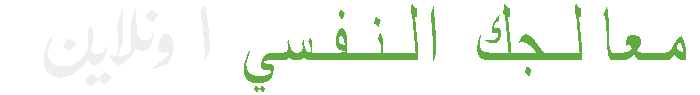
<style>
.page{position:relative;width:700px;height:95px;background:#ffffff}
.page>*{position:absolute;margin:0}
.t1{font:92.7px "UrduTypesetting";letter-spacing:-0.02em;color:#eeeeee;scale:1.1 1}
.t2{font:92.7px "SimplifiedArabicFixed";letter-spacing:-0.02em;color:#eeeeee;scale:1.1 1}
.t3{font:91px "SimplifiedArabicFixed";letter-spacing:-0.02em;color:#5faa41;scale:0.65 1}
</style>
<div class="page">
<p class="t1" style="left:44px;top:5px;width:166px;height:81px"><span class="t2">ا</span>ونلاين</p>
<p class="t3" style="left:244px;top:4px;width:442px;height:88px">معالجك النفسي</p>
</div>
